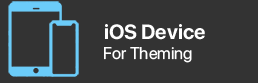
<style>
.page{position:relative;width:258px;height:83px;background:#333333}
.page>*{position:absolute;margin:0}
.t1{font:20.6px "SFProDisplay-Bold";color:#ffffff}
.t2{font:16.9px "SFProDisplay-Regular";color:#ffffff}
</style>
<div class="page">
<p class="t1" style="left:105px;top:24px;width:100px;height:16px">iOS Device</p>
<p class="t2" style="left:104px;top:47px;width:88px;height:16px">For Theming</p>
</div>
